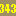
<style>
.page{position:relative;width:16px;height:16px;background:#9f8f63}
.page>*{position:absolute;margin:0}
.t1{font:11.4px "Impact";color:#ffff00}
</style>
<div class="page">
<p class="t1" style="left:0px;top:4px;width:16px;height:9px">343</p>
</div>
